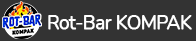
<style>
.page{position:relative;width:196px;height:41px;background:#333333}
.page>*{position:absolute;margin:0}
.t1{font:18.6px "Nunito-Regular";letter-spacing:-0.04em;color:#ffffff;font-weight:bold}
</style>
<div class="page">
<p class="t1" style="left:48px;top:15px;width:144px;height:15px">Rot-Bar KOMPAK</p>
</div>
